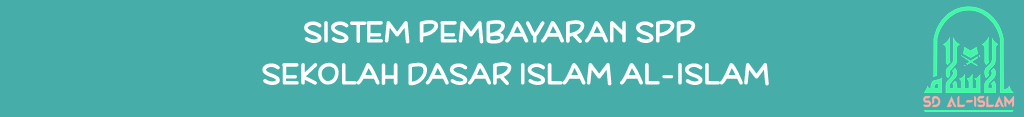
<style>
.page{position:relative;width:1024px;height:117px;background:#46ada9}
.page>*{position:absolute;margin:0}
.t1{font:28.2px "DeFonarts";color:#ffffff}
</style>
<div class="page">
<p class="t1" style="left:304px;top:20px;width:392px;height:24px">SISTEM PEMBAYARAN SPP</p>
<p class="t1" style="left:262px;top:62px;width:507px;height:24px">SEKOLAH DASAR ISLAM AL-ISLAM</p>
</div>
